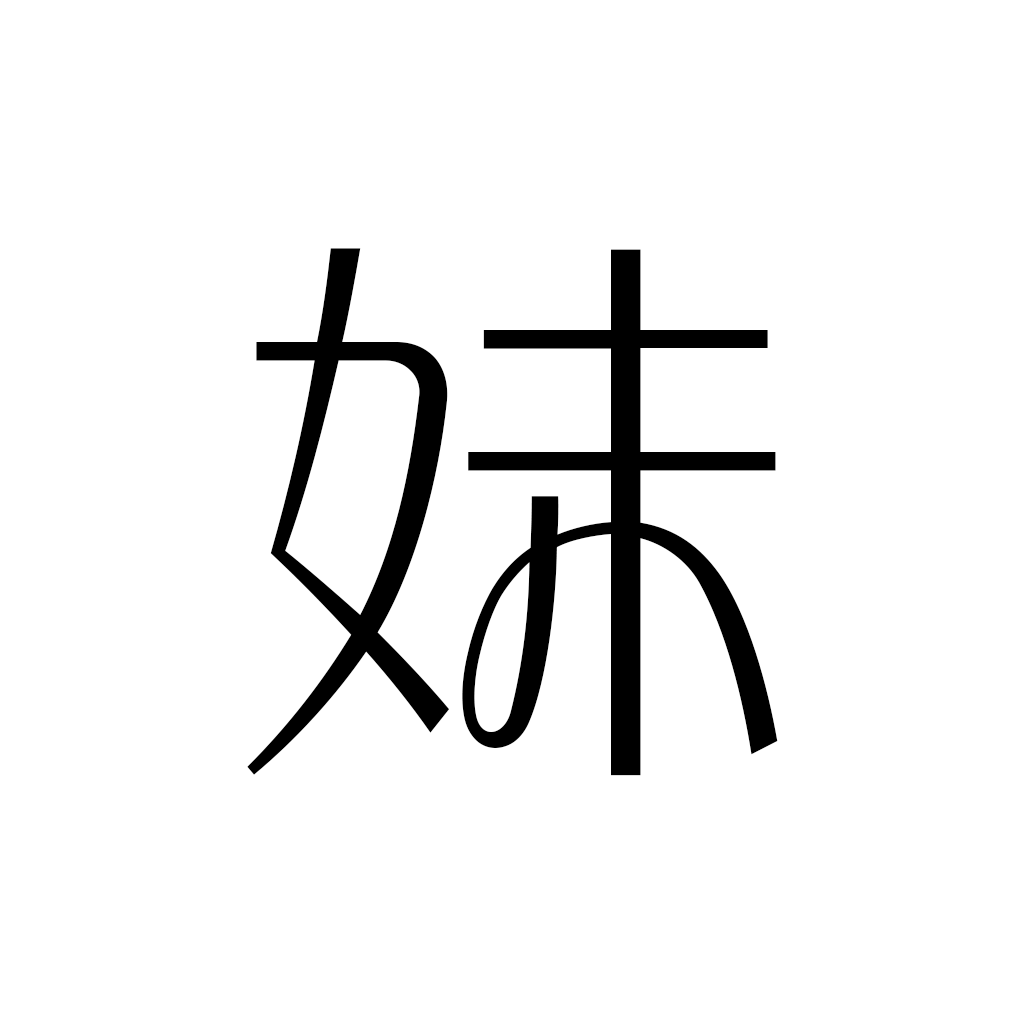
<style>
.page{position:relative;width:1024px;height:1024px;background:#ffffff}
.page>*{position:absolute;margin:0}
.t1{font:600px "MGentleHKS-Light";color:#000000}
</style>
<div class="page">
<p class="t1" style="left:247px;top:248px;width:531px;height:528px">妹</p>
</div>
